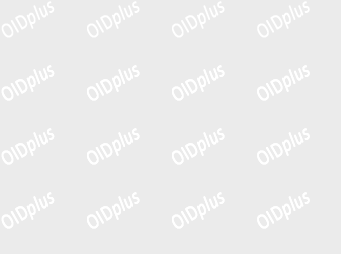
<style>
.page{position:relative;width:341px;height:254px;background:#ebebeb}
.page>*{position:absolute;margin:0}
.t1{font:21.7px "Calibri-Italic";color:#ffffff;font-weight:bold;scale:0.8 1}
.t2{font:21.7px "Calibri";color:#ffffff;font-weight:bold;scale:0.8 1}
</style>
<div class="page">
<p class="t1" style="left:1px;top:1px;width:54px;height:37px;rotate:-30deg"><span class="t2">OID</span>plus</p>
<p class="t1" style="left:87px;top:1px;width:53px;height:37px;rotate:-30deg"><span class="t2">OID</span>plus</p>
<p class="t1" style="left:172px;top:1px;width:53px;height:37px;rotate:-30deg"><span class="t2">OID</span>plus</p>
<p class="t1" style="left:257px;top:1px;width:53px;height:37px;rotate:-30deg"><span class="t2">OID</span>plus</p>
<p class="t1" style="left:1px;top:65px;width:54px;height:36px;rotate:-30deg"><span class="t2">OID</span>plus</p>
<p class="t1" style="left:1px;top:65px;width:54px;height:36px;rotate:-30deg"><span class="t2">OID</span>plus</p>
<p class="t1" style="left:87px;top:65px;width:53px;height:36px;rotate:-30deg"><span class="t2">OID</span>plus</p>
<p class="t1" style="left:87px;top:65px;width:53px;height:36px;rotate:-30deg"><span class="t2">OID</span>plus</p>
<p class="t1" style="left:172px;top:65px;width:53px;height:36px;rotate:-30deg"><span class="t2">OID</span>plus</p>
<p class="t1" style="left:172px;top:65px;width:53px;height:36px;rotate:-30deg"><span class="t2">OID</span>plus</p>
<p class="t1" style="left:257px;top:65px;width:53px;height:36px;rotate:-30deg"><span class="t2">OID</span>plus</p>
<p class="t1" style="left:257px;top:65px;width:53px;height:36px;rotate:-30deg"><span class="t2">OID</span>plus</p>
<p class="t1" style="left:1px;top:128px;width:54px;height:37px;rotate:-30deg"><span class="t2">OID</span>plus</p>
<p class="t1" style="left:1px;top:128px;width:54px;height:37px;rotate:-30deg"><span class="t2">OID</span>plus</p>
<p class="t1" style="left:87px;top:128px;width:53px;height:37px;rotate:-30deg"><span class="t2">OID</span>plus</p>
<p class="t1" style="left:87px;top:128px;width:53px;height:37px;rotate:-30deg"><span class="t2">OID</span>plus</p>
<p class="t1" style="left:172px;top:128px;width:53px;height:37px;rotate:-30deg"><span class="t2">OID</span>plus</p>
<p class="t1" style="left:172px;top:128px;width:53px;height:37px;rotate:-30deg"><span class="t2">OID</span>plus</p>
<p class="t1" style="left:257px;top:128px;width:53px;height:37px;rotate:-30deg"><span class="t2">OID</span>plus</p>
<p class="t1" style="left:257px;top:128px;width:53px;height:37px;rotate:-30deg"><span class="t2">OID</span>plus</p>
<p class="t1" style="left:1px;top:192px;width:54px;height:37px;rotate:-30deg"><span class="t2">OID</span>plus</p>
<p class="t1" style="left:1px;top:192px;width:54px;height:37px;rotate:-30deg"><span class="t2">OID</span>plus</p>
<p class="t1" style="left:87px;top:192px;width:53px;height:37px;rotate:-30deg"><span class="t2">OID</span>plus</p>
<p class="t1" style="left:87px;top:192px;width:53px;height:37px;rotate:-30deg"><span class="t2">OID</span>plus</p>
<p class="t1" style="left:172px;top:192px;width:53px;height:37px;rotate:-30deg"><span class="t2">OID</span>plus</p>
<p class="t1" style="left:172px;top:192px;width:53px;height:37px;rotate:-30deg"><span class="t2">OID</span>plus</p>
<p class="t1" style="left:257px;top:192px;width:53px;height:37px;rotate:-30deg"><span class="t2">OID</span>plus</p>
<p class="t1" style="left:257px;top:192px;width:53px;height:37px;rotate:-30deg"><span class="t2">OID</span>plus</p>
</div>
